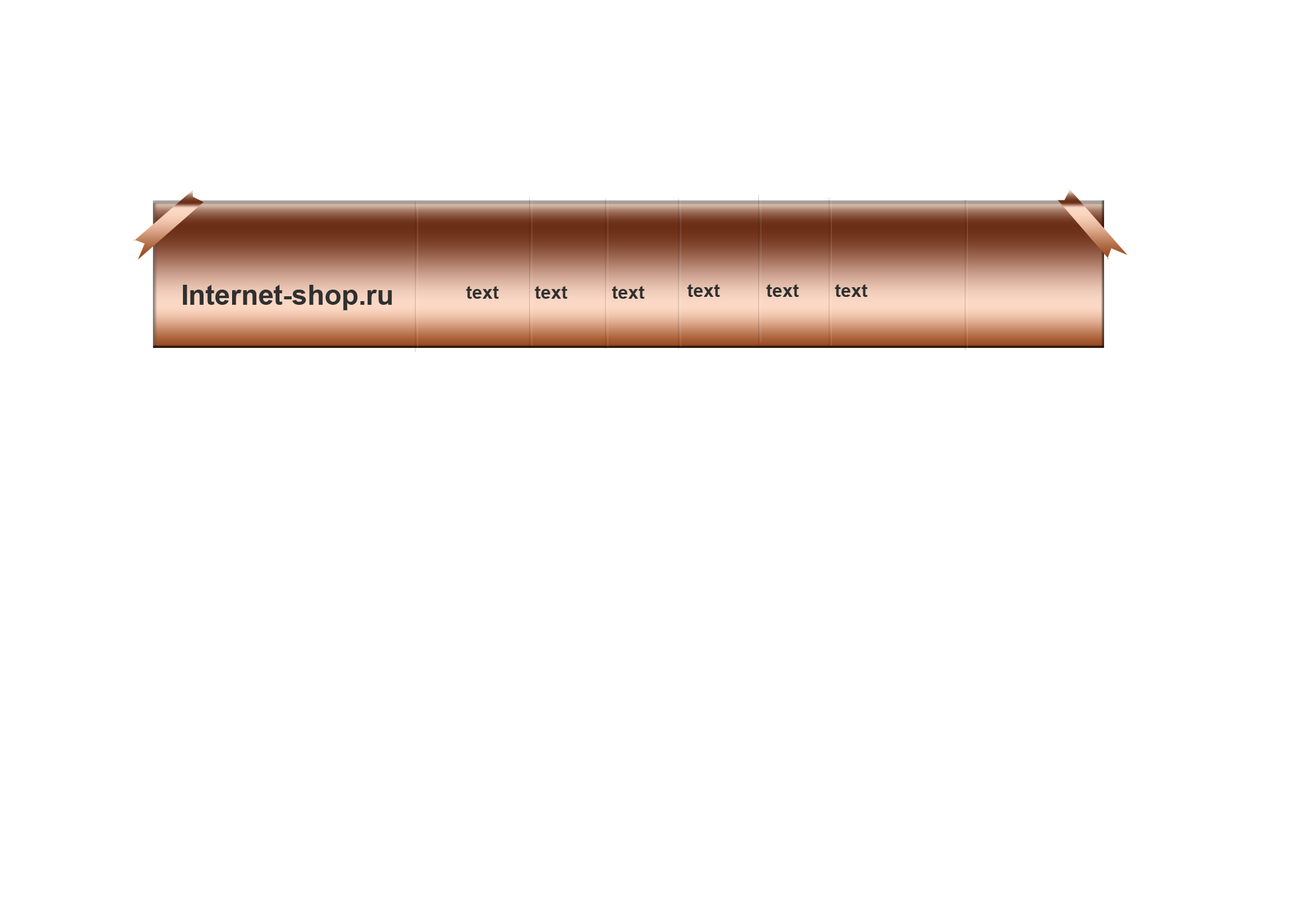
<style>
.page{position:relative;width:1299px;height:918px;background:#ffffff}
.page>*{position:absolute;margin:0}
.t1{font:27.8px "Arial-BoldMT";color:#2f302f}
.t2{font:18.5px "Arial-BoldMT";color:#2f302f}
</style>
<div class="page">
<p class="t1" style="left:183px;top:285px;width:209px;height:25px">Internet-shop.ru</p>
<p class="t2" style="left:466px;top:286px;width:33px;height:13px">text</p>
<p class="t2" style="left:534px;top:286px;width:33px;height:13px">text</p>
<p class="t2" style="left:612px;top:286px;width:32px;height:13px">text</p>
<p class="t2" style="left:687px;top:284px;width:33px;height:13px">text</p>
<p class="t2" style="left:766px;top:284px;width:33px;height:13px">text</p>
<p class="t2" style="left:834px;top:284px;width:33px;height:13px">text</p>
</div>
